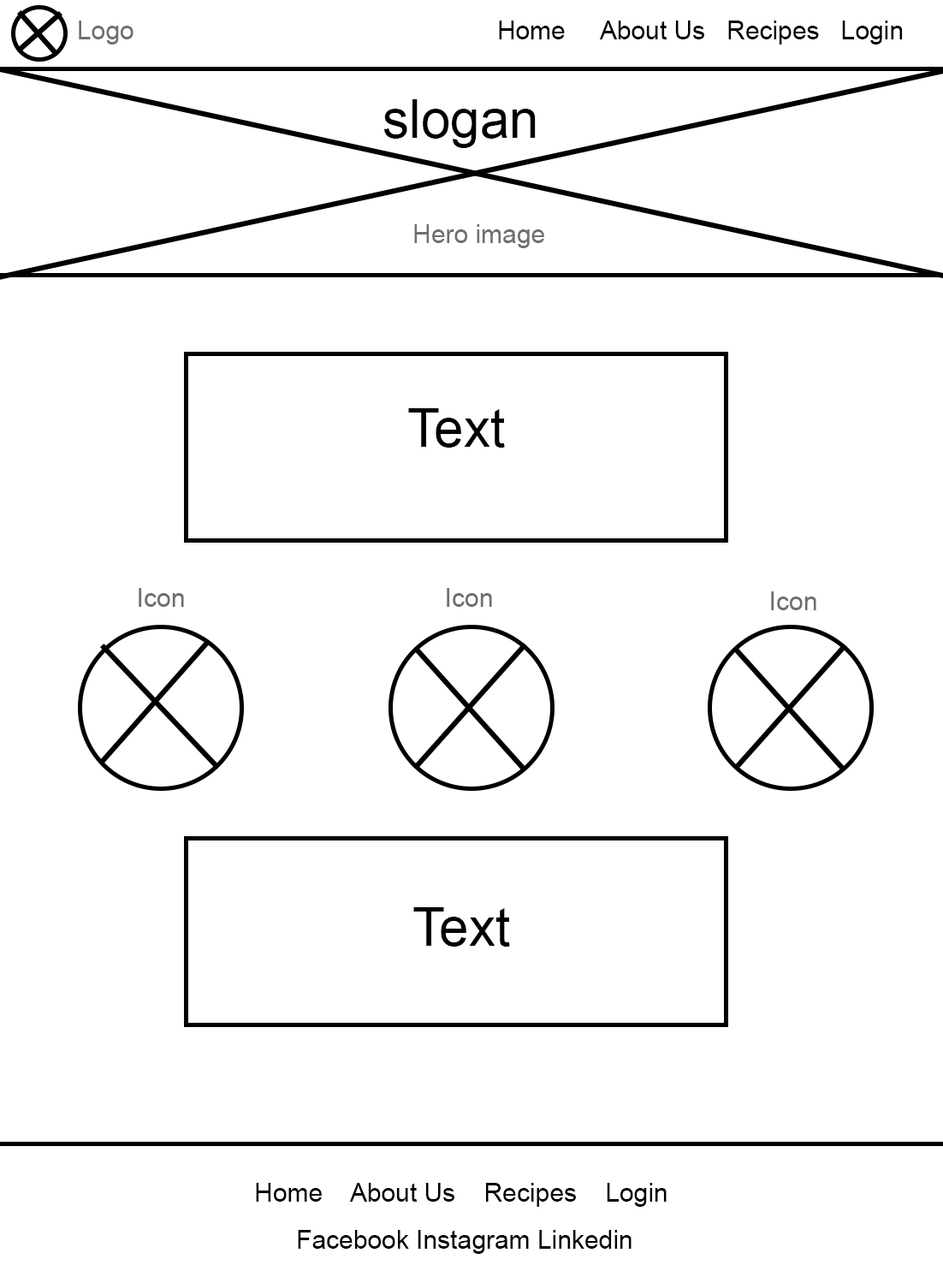
<style>
.page{position:relative;width:943px;height:1265px;background:#ffffff}
.page>*{position:absolute;margin:0}
.t1{font:25.7px "ArialMT";color:#6f6f6f}
.t2{font:25.7px "ArialMT";color:#000000}
.t3{font:53px "ArialMT";color:#000000}
</style>
<div class="page">
<p class="t1" style="left:79px;top:21px;width:54px;height:23px">Logo</p>
<p class="t2" style="left:499px;top:21px;width:404px;height:23px">Home     About Us   Recipes   Login</p>
<p class="t3" style="left:383px;top:99px;width:153px;height:49px">slogan</p>
<p class="t1" style="left:414px;top:224px;width:130px;height:24px">Hero image</p>
<p class="t3" style="left:408px;top:408px;width:97px;height:39px">Text</p>
<p class="t1" style="left:139px;top:588px;width:45px;height:19px">Icon</p>
<p class="t1" style="left:447px;top:588px;width:45px;height:19px">Icon</p>
<p class="t1" style="left:771px;top:591px;width:45px;height:19px">Icon</p>
<p class="t3" style="left:413px;top:907px;width:97px;height:39px">Text</p>
<p class="t2" style="left:256px;top:1182px;width:411px;height:24px">Home    About Us    Recipes    Login</p>
<p class="t2" style="left:298px;top:1230px;width:333px;height:24px">Facebook Instagram Linkedin</p>
</div>
